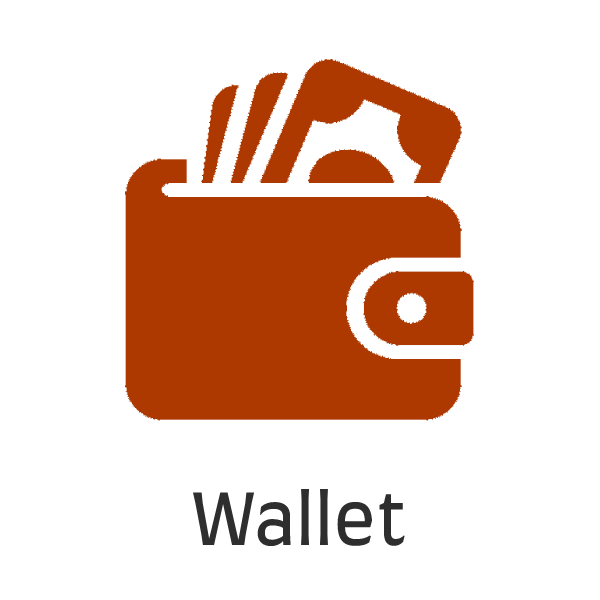
<style>
.page{position:relative;width:600px;height:600px;background:#ffffff}
.page>*{position:absolute;margin:0}
.t1{font:70px "Farro-Regular";color:#2e2e2e}
</style>
<div class="page">
<p class="t1" style="left:192px;top:489px;width:213px;height:58px">Wallet</p>
</div>
